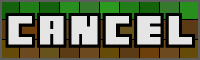
<style>
.page{position:relative;width:200px;height:60px;background:#e5e5e5}
.page>*{position:absolute;margin:0}
.t1{font:42px "Blocked";color:#010101}
</style>
<div class="page">
<p class="t1" style="left:5px;top:13px;width:190px;height:35px">cancel</p>
</div>
